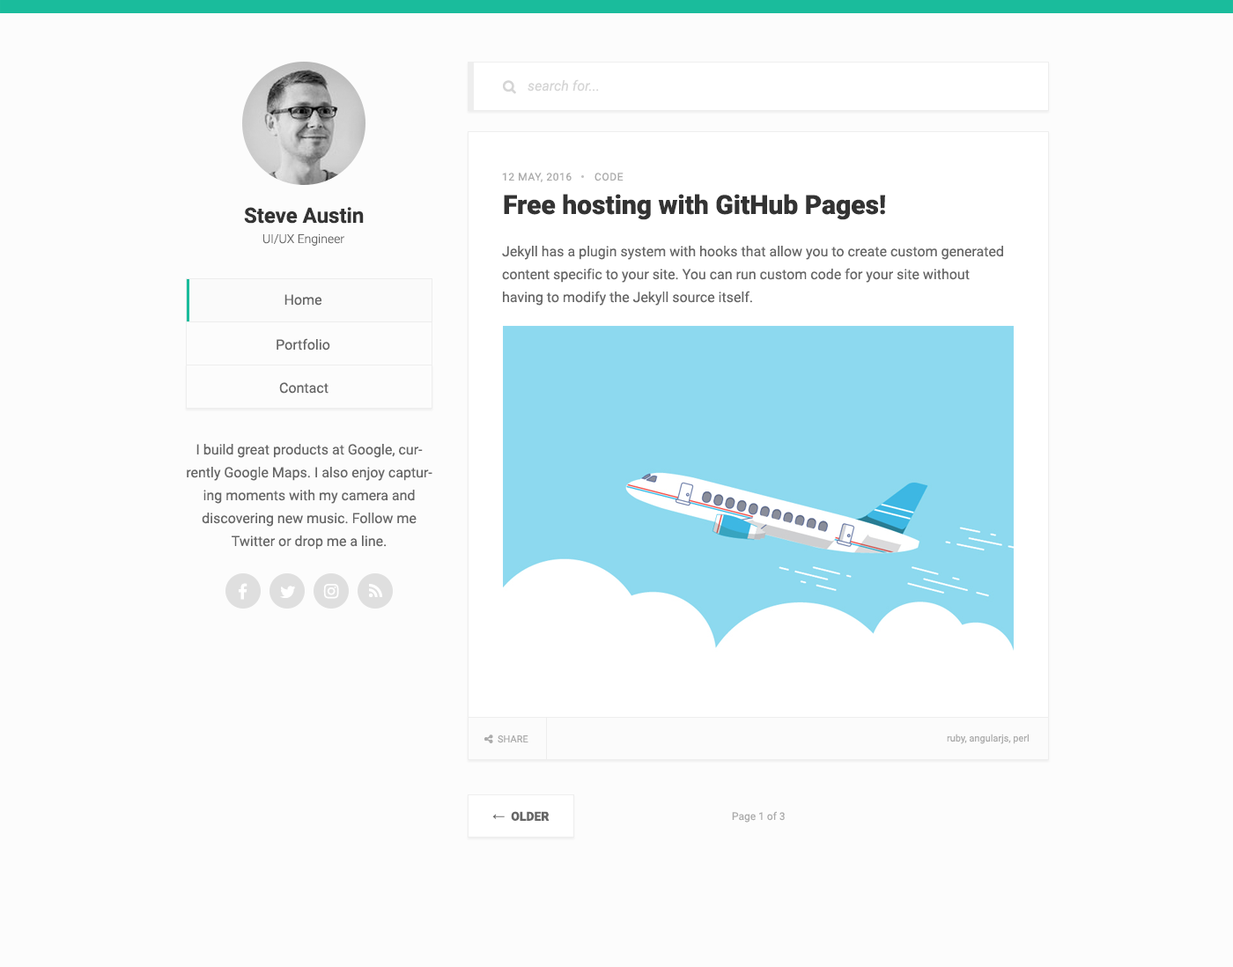
<style>
.page{position:relative;width:1233px;height:967px;background:#fcfcfc}
.page>*{position:absolute;margin:0}
.t1{font:14.1px "Roboto-Italic";color:#d5d5d5}
.t2{font:10.6px "Roboto-Regular";letter-spacing:0.05em;color:#aaaaaa;text-transform:uppercase}
.t3{font:26.4px "Roboto-Black";color:#333333}
.t4{font:21.1px "Roboto-Bold";color:#333333}
.t5{font:12.3px "Roboto-Light";color:#666666}
.t6{font:14.1px/22.9px "Roboto-Regular";color:#666666}
.t7{font:14.1px "Roboto-Regular";color:#666666}
.t8{font:9.7px "Roboto-Regular";color:#aaaaaa;text-transform:uppercase}
.t9{font:9.7px "Roboto-Regular";color:#aaaaaa}
.t10{font:12.3px "Roboto-Black";color:#666666;text-transform:uppercase}
.t11{font:12.3px "TimesNewRomanPSMT";color:#666666;text-transform:uppercase}
.t12{font:10.6px "Roboto-Regular";color:#aaaaaa}
</style>
<div class="page">
<p class="t1" style="left:528px;top:79px;width:71px;height:13px">search for...</p>
<p class="t2" style="left:502px;top:173px;width:70px;height:9px">12 May, 2016</p>
<p class="t2" style="left:595px;top:173px;width:29px;height:8px">Code</p>
<p class="t3" style="left:504px;top:194px;width:381px;height:26px">Free hosting with GitHub Pages!</p>
<p class="t4" style="left:244px;top:207px;width:120px;height:17px">Steve Austin</p>
<p class="t5" style="left:263px;top:233px;width:81px;height:13px">UI/UX Engineer</p>
<p class="t6" style="left:502px;top:246px;width:501px;height:60px">Jekyll has a plugin system with hooks that allow you to create custom generated content specific to your site. You can run custom code for your site without having to modify the Jekyll source itself.</p>
<p class="t7" style="left:284px;top:294px;width:37px;height:12px">Home</p>
<p class="t7" style="left:277px;top:338px;width:53px;height:13px">Portfolio</p>
<p class="t7" style="left:279px;top:382px;width:50px;height:12px">Contact</p>
<p class="t6" style="left:187px;top:444px;width:245px;height:106px;text-align:center">I build great products at Google, currently Google Maps. I also enjoy capturing moments with my camera and discovering new music. Follow me Twitter or drop me a line.</p>
<p class="t8" style="left:498px;top:735px;width:30px;height:8px">Share</p>
<p class="t9" style="left:947px;top:734px;width:82px;height:10px">ruby, angularjs, perl</p>
<p class="t10" style="left:492px;top:811px;width:58px;height:10px"><span class="t11">←</span>  Older</p>
<p class="t12" style="left:732px;top:811px;width:53px;height:12px">Page 1 of 3</p>
</div>
